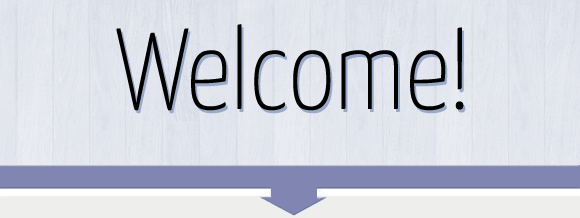
<style>
.page{position:relative;width:580px;height:218px}
.page>*{position:absolute;margin:0}
.t1{font:115px "YanoneKaffeesatz-Thin";color:#010100}
.t2{font:115px "YanoneKaffeesatz-Thin"}
</style>
<div class="page">
<p class="t1" style="left:116px;top:24px;width:348px;height:87px">Welcome!</p>
<p class="t2" style="left:118px;top:27px;width:348px;height:87px">Welcome!</p>
</div>
